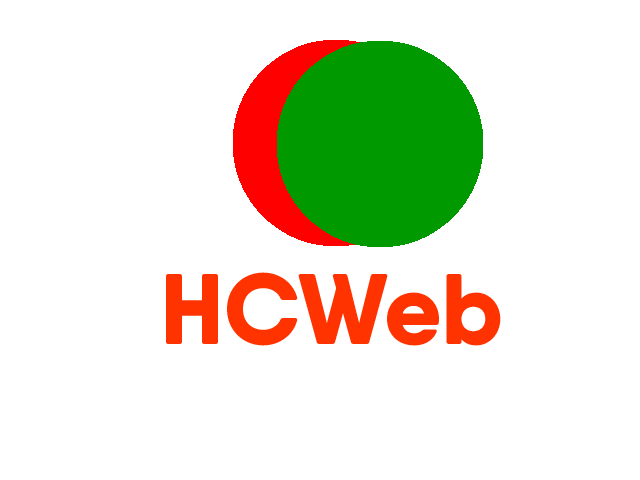
<style>
.page{position:relative;width:640px;height:480px;background:#ffffff}
.page>*{position:absolute;margin:0}
.t1{font:100px "QanelasSoftDEMO-ExtraBold";color:#ff3300}
</style>
<div class="page">
<p class="t1" style="left:166px;top:272px;width:335px;height:74px">HCWeb</p>
</div>
